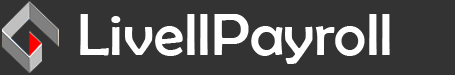
<style>
.page{position:relative;width:455px;height:75px;background:#333333}
.page>*{position:absolute;margin:0}
.t1{font:60px "BerlinSansFB-Reg";color:#ffffff;scale:1.03 1}
</style>
<div class="page">
<p class="t1" style="left:80px;top:14px;width:310px;height:50px">LivellPayroll</p>
</div>
